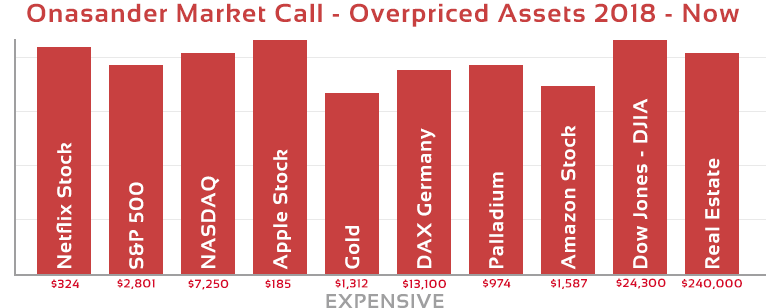
<style>
.page{position:relative;width:766px;height:308px;background:#c84040}
.page>*{position:absolute;margin:0}
.t1{font:26px "Sansation-Bold";letter-spacing:0.05em;color:#c84040}
.t2{font:20px "Sansation-Bold";letter-spacing:0.05em;color:#ffffff}
.t3{font:12px "Sansation-Bold";letter-spacing:0.05em;color:#d7082a}
.t4{font:20px "Sansation-Bold";letter-spacing:0.05em;color:#9f9fa0}
</style>
<div class="page">
<p class="t1" style="left:27px;top:3px;width:712px;height:24px">Onasander Market Call - Overpriced Assets 2018 - Now</p>
<p class="t2" style="left:633px;top:98px;width:15px;height:170px;rotate:-90deg">Dow Jones - DJIA</p>
<p class="t2" style="left:561px;top:125px;width:15px;height:145px;rotate:-90deg">Amazon Stock</p>
<p class="t2" style="left:417px;top:128px;width:19px;height:140px;rotate:-90deg">DAX Germany</p>
<p class="t2" style="left:56px;top:142px;width:16px;height:126px;rotate:-90deg">Netflix Stock</p>
<p class="t2" style="left:273px;top:149px;width:18px;height:121px;rotate:-90deg">Apple Stock</p>
<p class="t2" style="left:705px;top:158px;width:15px;height:110px;rotate:-90deg">Real Estate</p>
<p class="t2" style="left:489px;top:172px;width:15px;height:96px;rotate:-90deg">Palladium</p>
<p class="t2" style="left:129px;top:182px;width:15px;height:87px;rotate:-90deg">S&amp;P 500</p>
<p class="t2" style="left:201px;top:176px;width:19px;height:92px;rotate:-90deg">NASDAQ</p>
<p class="t2" style="left:345px;top:226px;width:15px;height:43px;rotate:-90deg">Gold</p>
<p class="t3" style="left:51px;top:279px;width:29px;height:9px">$324</p>
<p class="t3" style="left:117px;top:279px;width:38px;height:10px">$2,801</p>
<p class="t3" style="left:188px;top:279px;width:41px;height:11px">$7,250</p>
<p class="t3" style="left:265px;top:279px;width:26px;height:9px">$185</p>
<p class="t3" style="left:335px;top:279px;width:33px;height:10px">$1,312</p>
<p class="t3" style="left:403px;top:279px;width:43px;height:11px">$13,100</p>
<p class="t3" style="left:483px;top:279px;width:28px;height:9px">$974</p>
<p class="t3" style="left:551px;top:279px;width:36px;height:10px">$1,587</p>
<p class="t3" style="left:616px;top:278px;width:50px;height:11px">$24,300</p>
<p class="t3" style="left:682px;top:279px;width:60px;height:10px">$240,000</p>
<p class="t4" style="left:326px;top:294px;width:118px;height:14px">EXPENSIVE</p>
</div>
